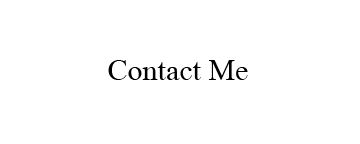
<style>
.page{position:relative;width:360px;height:144px;background:#ffffff}
.page>*{position:absolute;margin:0}
.t1{font:30px "MongolianBaiti";color:#000000}
</style>
<div class="page">
<p class="t1" style="left:108px;top:60px;width:140px;height:20px">Contact Me</p>
</div>
